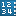
<style>
.page{position:relative;width:16px;height:16px}
.page>*{position:absolute;margin:0}
.t1{font:9px "Silkscreen";color:#ffffff}
</style>
<div class="page">
<p class="t1" style="left:2px;top:2px;width:9px;height:5px">12</p>
<p class="t1" style="left:2px;top:9px;width:10px;height:5px">34</p>
</div>
